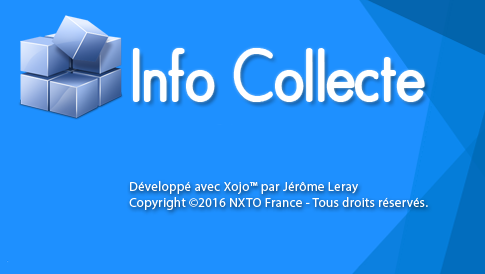
<style>
.page{position:relative;width:485px;height:274px;background:#1e90ff}
.page>*{position:absolute;margin:0}
.t1{font:72px "MAXIMO-Normal";letter-spacing:0.05em;color:#fffeff;scale:0.82 1}
.t2{font:13px "MyriadPro-Regular";letter-spacing:0.025em;color:#ffffff}
.t3{font:14px "MyriadPro-Regular";letter-spacing:0.025em;color:#000000;font-weight:bold}
</style>
<div class="page">
<p class="t1" style="left:135px;top:50px;width:288px;height:50px">Info Collecte</p>
<p class="t2" style="left:129px;top:181px;width:299px;height:29px"><span class="t3"><br><br><br><br><br></span>Développé avec Xojo™ par Jérôme Leray<br>Copyright ©2016 NXTO France - Tous droits réservés.</p>
</div>
